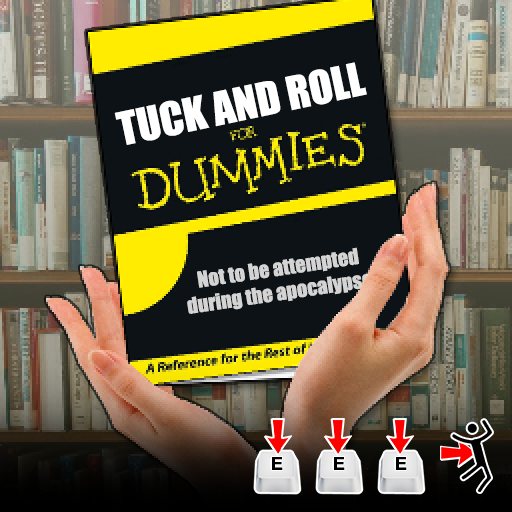
<style>
.page{position:relative;width:512px;height:512px}
.page>*{position:absolute;margin:0}
.t1{font:42.5px "Impact";color:#ffffff}
.t2{font:20.4px "Impact";color:#d4d4d4}
.t3{font:18px "Arial-BoldMT";color:#000000}
</style>
<div class="page">
<p class="t1" style="left:114px;top:62px;width:253px;height:83px;rotate:-12deg">TUCK AND ROLL</p>
<p class="t2" style="left:187px;top:247px;width:190px;height:67px;rotate:-8deg">Not to be attempted during the apocalypse.</p>
<p class="t3" style="left:272px;top:457px;width:11px;height:13px">E</p>
<p class="t3" style="left:334px;top:457px;width:11px;height:13px">E</p>
<p class="t3" style="left:396px;top:457px;width:11px;height:13px">E</p>
</div>
